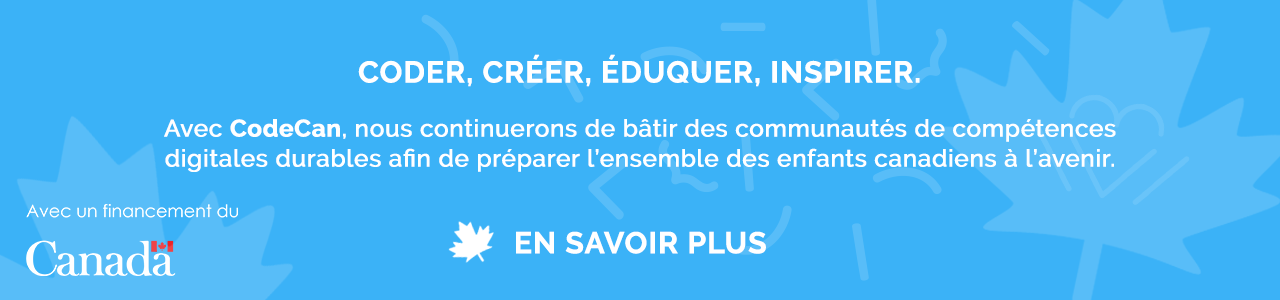
<style>
.page{position:relative;width:1280px;height:300px;background:#3bb2f7}
.page>*{position:absolute;margin:0}
.t1{font:23.9px/30px "Raleway-Medium";letter-spacing:0.01em;color:#ffffff;font-weight:bold}
.t2{font:29.9px/23.9px "Raleway-Bold";letter-spacing:0.01em;color:#ffffff;text-transform:uppercase;font-weight:bold}
.t3{font:23.9px/30px "Raleway-Bold";letter-spacing:0.01em;color:#ffffff;font-weight:bold}
.t4{font:30px "Raleway-Bold";letter-spacing:0.01em;color:#ffffff;text-transform:uppercase;font-weight:bold}
</style>
<div class="page">
<p class="t1" style="left:164px;top:54px;width:952px;height:118px;text-align:center"><span class="t2">CodeR, CrÉER, ÉDUQUER, InspirER.<br><br></span>Avec <span class="t3">CodeCan</span>, nous continuerons de bâtir des communautés de compétences <br>digitales durables afin de préparer l’ensemble des enfants canadiens à l’avenir.</p>
<p class="t4" style="left:516px;top:231px;width:250px;height:23px">EN SAVOIR PLUS</p>
</div>
